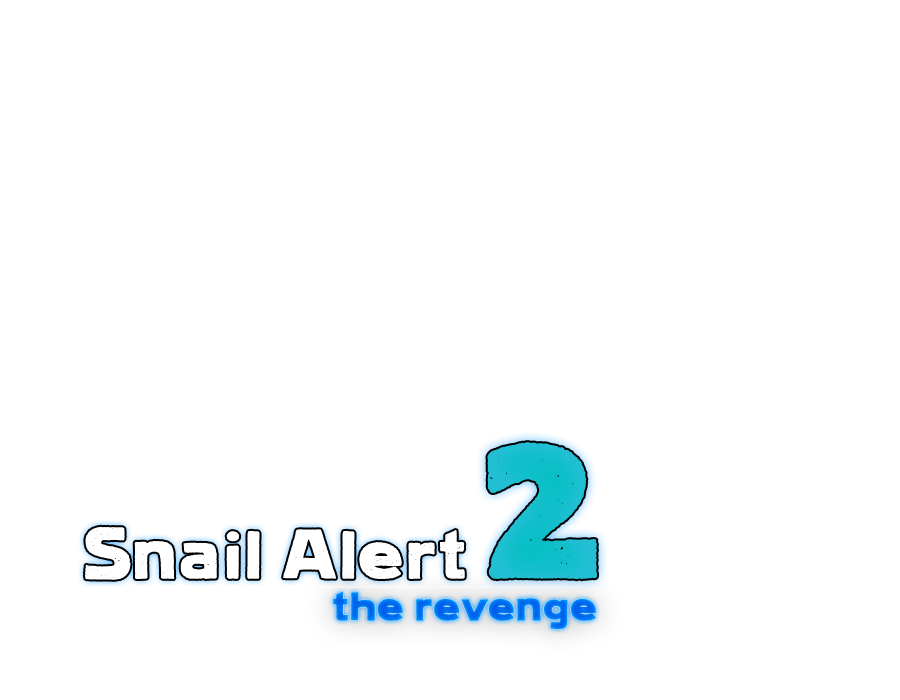
<style>
.page{position:relative;width:900px;height:700px;background:#ffffff}
.page>*{position:absolute;margin:0}
.t1{font:207.1px "LietzLindauHamburg";color:#15bfcd}
.t2{font:69.1px "LietzLindauHamburg";color:#ffffff}
.t3{font:40.7px "LietzLindauHamburg";color:#006eef}
</style>
<div class="page">
<p class="t1" style="left:487px;top:442px;width:110px;height:138px">2</p>
<p class="t2" style="left:84px;top:526px;width:381px;height:54px">Snail Alert</p>
<p class="t3" style="left:333px;top:591px;width:263px;height:39px">the revenge</p>
</div>
